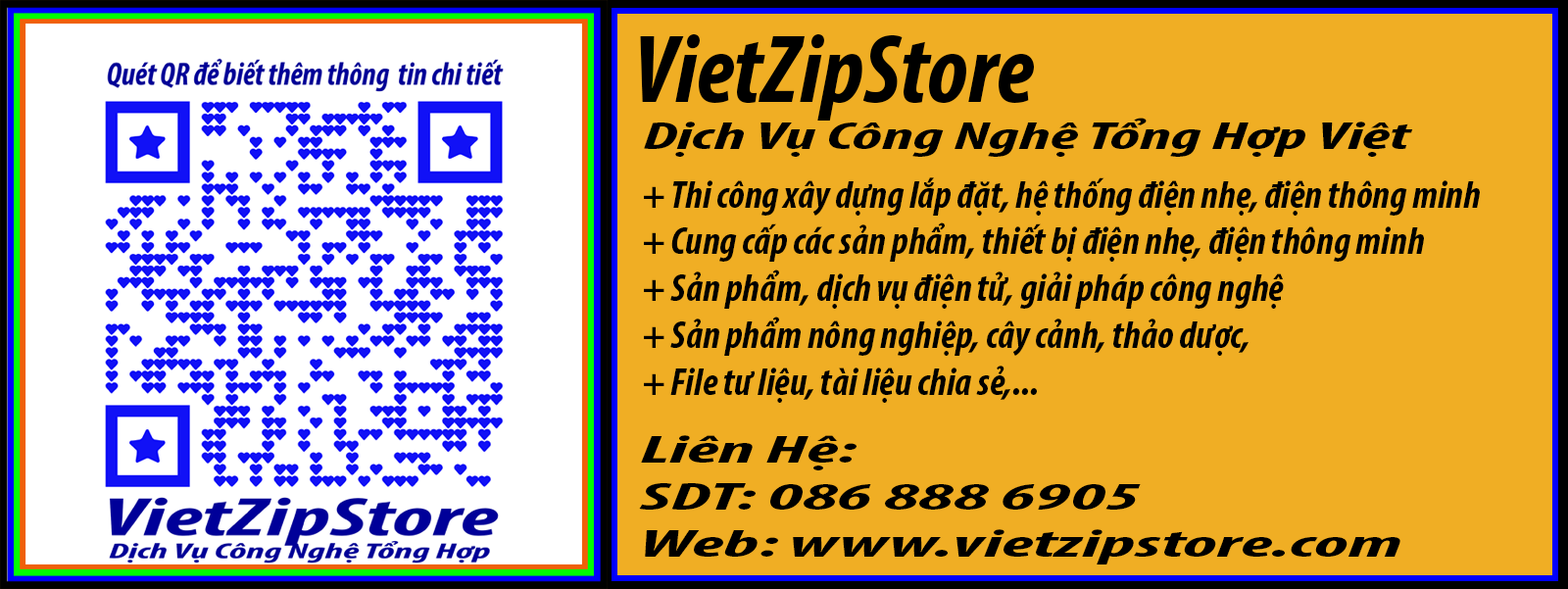
<style>
.page{position:relative;width:1568px;height:589px;background:#f0ae24}
.page>*{position:absolute;margin:0}
.t1{font:98px "MyriadPro-BoldCondIt";color:#000000}
.t2{font:38.8px "MyriadPro-BoldCondIt";color:#000000;scale:1.82 1}
.t3{font:39.1px "MyriadPro-BoldCondIt";color:#000000}
.t4{font:39.1px "MyriadPro-BoldCondIt";color:#000000;scale:2.09 1}
</style>
<div class="page">
<p class="t1" style="left:640px;top:34px;width:394px;height:87px">VietZipStore</p>
<p class="t2" style="left:644px;top:118px;width:769px;height:39px">Dịch Vụ Công Nghệ Tổng Hợp Việt</p>
<p class="t3" style="left:644px;top:177px;width:836px;height:226px">+ Thi công xây dựng lắp đặt, hệ thống điện nhẹ, điện thông minh<br>+ Cung cấp các sản phẩm, thiết bị điện nhẹ, điện thông minh<br>+ Sản phẩm, dịch vụ điện tử, giải pháp công nghệ<br>+ Sản phẩm nông nghiệp, cây cảnh, thảo dược,<br>+ File tư liệu, tài liệu chia sẻ,...</p>
<p class="t4" style="left:639px;top:435px;width:761px;height:129px">Liên Hệ: <br>SDT: 086 888 6905<br>Web: www.vietzipstore.com</p>
</div>
